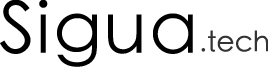
<style>
.page{position:relative;width:271px;height:67px;background:#ffffff}
.page>*{position:absolute;margin:0}
.t1{font:72px "STHeitiSC-Light";letter-spacing:0.025em;color:#000000}
.t2{font:28px "STHeitiSC-Light";color:#333333}
</style>
<div class="page">
<p class="t1" style="left:0px;top:0px;width:193px;height:67px">Sigua</p>
<p class="t2" style="left:201px;top:30px;width:67px;height:22px">.tech</p>
</div>
